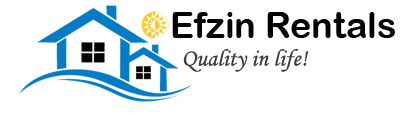
<style>
.page{position:relative;width:400px;height:120px;background:#ffffff}
.page>*{position:absolute;margin:0}
.t1{font:36px "ArialRoundedMTBold";color:#030303}
.t2{font:24px "MonotypeCorsiva";color:#3c3e40}
</style>
<div class="page">
<p class="t1" style="left:172px;top:12px;width:223px;height:26px">Efzin Rentals</p>
<p class="t2" style="left:183px;top:48px;width:126px;height:24px">Quality in life!</p>
</div>
